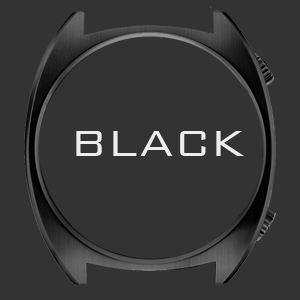
<style>
.page{position:relative;width:300px;height:300px;background:#333333}
.page>*{position:absolute;margin:0}
.t1{font:48px "BankGothicBT-Light";color:#ededed}
</style>
<div class="page">
<p class="t1" style="left:76px;top:131px;width:168px;height:25px">BLACK</p>
</div>
